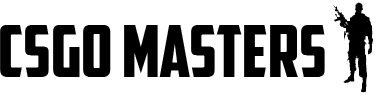
<style>
.page{position:relative;width:376px;height:95px;background:#ffffff}
.page>*{position:absolute;margin:0}
.t1{font:72.3px "AmericanCaptain";color:#000000}
</style>
<div class="page">
<p class="t1" style="left:0px;top:25px;width:325px;height:52px">CSGO MASTERS</p>
</div>
